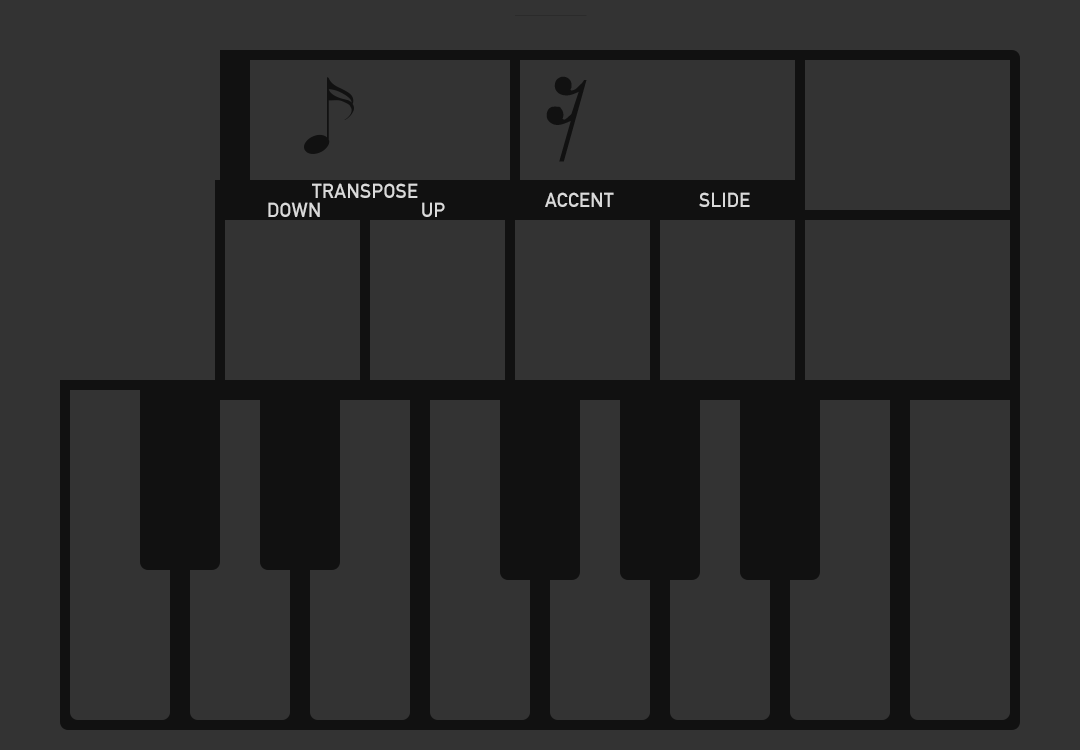
<style>
.page{position:relative;width:1080px;height:750px;background:#333333}
.page>*{position:absolute;margin:0}
.t1{font:20px "DINAlternate-Bold";color:#dadada;font-variant:small-caps}
</style>
<div class="page">
<p class="t1" style="left:312px;top:183px;width:106px;height:15px">TRANSPOSE</p>
<p class="t1" style="left:545px;top:192px;width:69px;height:15px">ACCENT</p>
<p class="t1" style="left:699px;top:192px;width:51px;height:15px">SLIDE</p>
<p class="t1" style="left:268px;top:202px;width:52px;height:15px">DOWN</p>
<p class="t1" style="left:422px;top:202px;width:23px;height:15px">UP</p>
</div>
